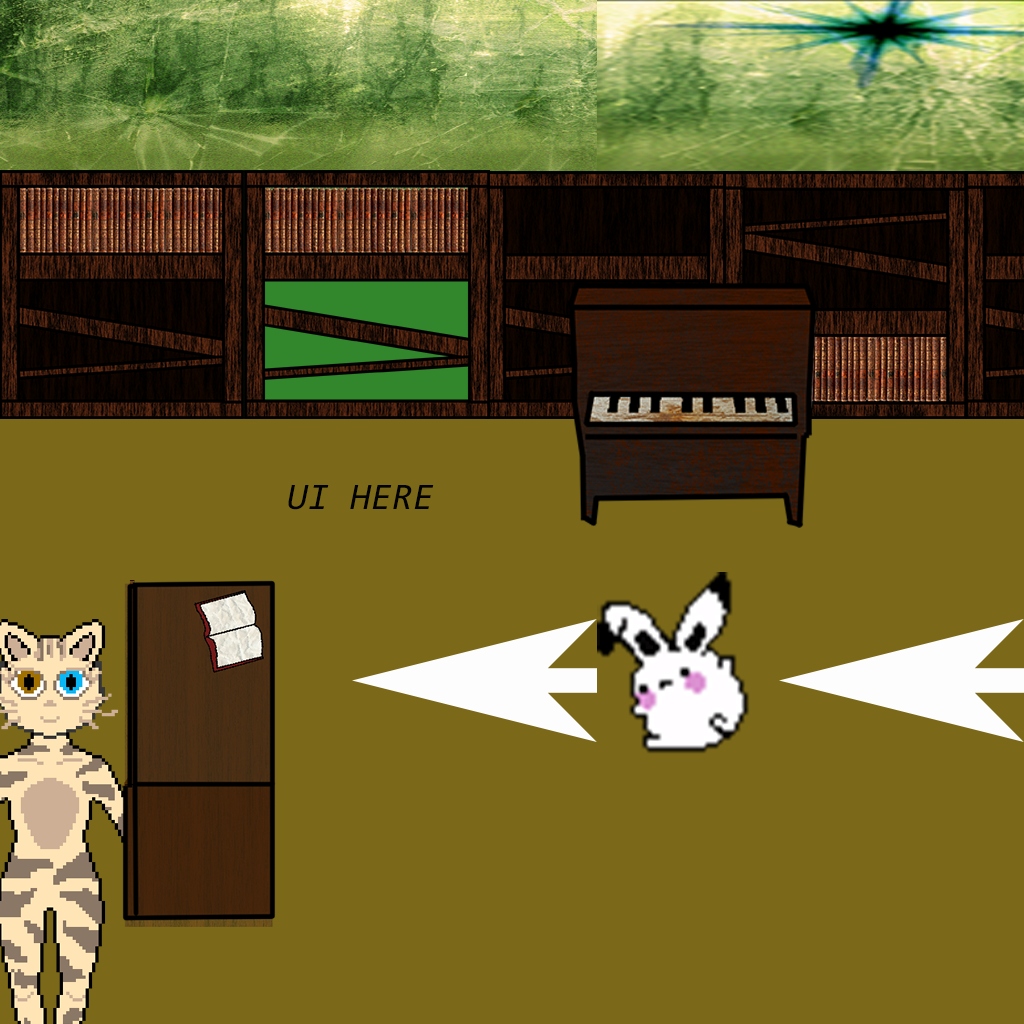
<style>
.page{position:relative;width:1024px;height:1024px;background:#7b6919}
.page>*{position:absolute;margin:0}
.t1{font:37.5px "Consolas-Italic";letter-spacing:0.01em;color:#010100;text-transform:uppercase}
</style>
<div class="page">
<p class="t1" style="left:288px;top:485px;width:146px;height:25px">UI Here</p>
</div>
